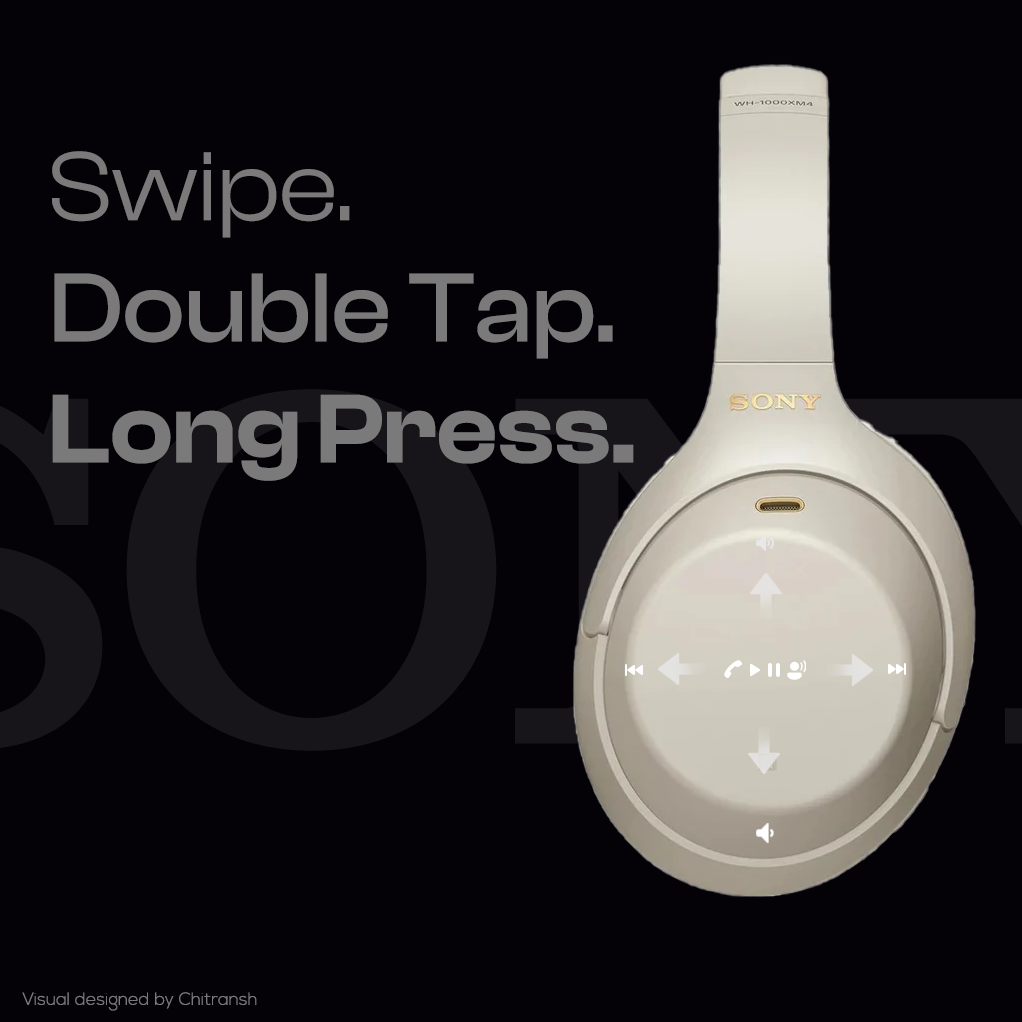
<style>
.page{position:relative;width:1022px;height:1022px;background:#040207}
.page>*{position:absolute;margin:0}
.t1{font:101px "ClashDisplayVariable-Medium";color:#7b7a7a}
.t2{font:101px "ClashDisplayVariable-Regular";color:#7b7a7a}
.t3{font:101px "ClashDisplayVariable-Semibold";color:#7b7a7a}
.t4{font:17.6px "NexaLight";color:#7b7a7a}
</style>
<div class="page">
<p class="t1" style="left:52px;top:151px;width:582px;height:330px"><span class="t2">Swipe.<br></span>Double Tap.<br><span class="t3">Long Press.</span></p>
<p class="t4" style="left:22px;top:992px;width:235px;height:19px">Visual designed by Chitransh</p>
</div>
